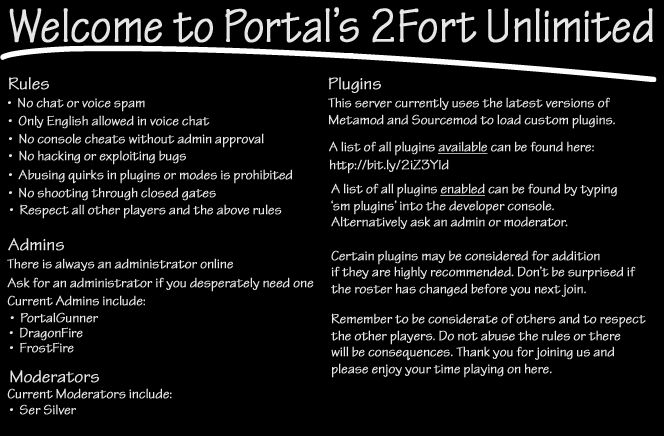
<style>
.page{position:relative;width:664px;height:436px;background:#000000}
.page>*{position:absolute;margin:0}
.t1{font:49.9px "TektonPro-Regular";color:#e6e6e6;font-weight:bold;scale:0.86 1}
.t2{font:17.9px "TektonPro-Regular";color:#e6e6e6;font-weight:bold}
.t3{font:13.9px "TektonPro-Regular";color:#e6e6e6;font-weight:bold}
.t4{font:13.9px "TektonPro-Regular";color:#e6e6e6;font-weight:bold;text-decoration:underline}
</style>
<div class="page">
<p class="t1" style="left:9px;top:7px;width:644px;height:36px">Welcome to Portal’s 2Fort Unlimited</p>
<p class="t2" style="left:9px;top:77px;width:40px;height:13px">Rules</p>
<p class="t2" style="left:328px;top:77px;width:53px;height:16px">Plugins</p>
<p class="t3" style="left:8px;top:97px;width:137px;height:15px">•  No chat or voice spam</p>
<p class="t3" style="left:328px;top:97px;width:287px;height:32px">This server currently uses the latest versions of<br>Metamod and Sourcemod to load custom plugins.</p>
<p class="t3" style="left:8px;top:115px;width:202px;height:14px">•  Only English allowed in voice chat</p>
<p class="t3" style="left:9px;top:133px;width:255px;height:15px">•  No console cheats without admin approval</p>
<p class="t3" style="left:9px;top:150px;width:177px;height:15px">•  No hacking or exploiting bugs</p>
<p class="t3" style="left:329px;top:141px;width:265px;height:15px">A list of all plugins <span class="t4">available</span> can be found here:</p>
<p class="t3" style="left:330px;top:159px;width:119px;height:15px">http://bit.ly/2iZ3YId</p>
<p class="t3" style="left:9px;top:169px;width:283px;height:15px">•  Abusing quirks in plugins or modes is prohibited</p>
<p class="t3" style="left:331px;top:183px;width:305px;height:114px">A list of all plugins <span class="t4">enabled</span> can be found by typing<br>‘sm plugins’ into the developer console.<br>Alternatively ask an admin or moderator.<br><br>Certain plugins may be considered for addition<br>if they are highly recommended. Don’t be surprised if<br>the roster has changed before you next join.</p>
<p class="t3" style="left:9px;top:187px;width:207px;height:14px">•  No shooting through closed gates</p>
<p class="t3" style="left:10px;top:204px;width:272px;height:15px">•  Respect all other players and the above rules</p>
<p class="t2" style="left:8px;top:238px;width:56px;height:13px">Admins</p>
<p class="t3" style="left:7px;top:258px;width:226px;height:13px">There is always an administrator online</p>
<p class="t3" style="left:7px;top:277px;width:307px;height:15px">Ask for an administrator if you desperately need one</p>
<p class="t3" style="left:7px;top:295px;width:138px;height:11px">Current Admins include:</p>
<p class="t3" style="left:10px;top:312px;width:88px;height:11px">•  PortalGunner</p>
<p class="t3" style="left:331px;top:313px;width:315px;height:65px">Remember to be considerate of others and to respect<br>the other players. Do not abuse the rules or there <br>will be consequences. Thank you for joining us and <br>please enjoy your time playing on here.</p>
<p class="t3" style="left:9px;top:327px;width:74px;height:14px">•  DragonFire</p>
<p class="t3" style="left:10px;top:342px;width:64px;height:11px">•  FrostFire</p>
<p class="t2" style="left:10px;top:370px;width:89px;height:13px">Moderators</p>
<p class="t3" style="left:7px;top:388px;width:165px;height:11px">Current Moderators include:</p>
<p class="t3" style="left:10px;top:404px;width:66px;height:11px">•  Ser Silver</p>
</div>
